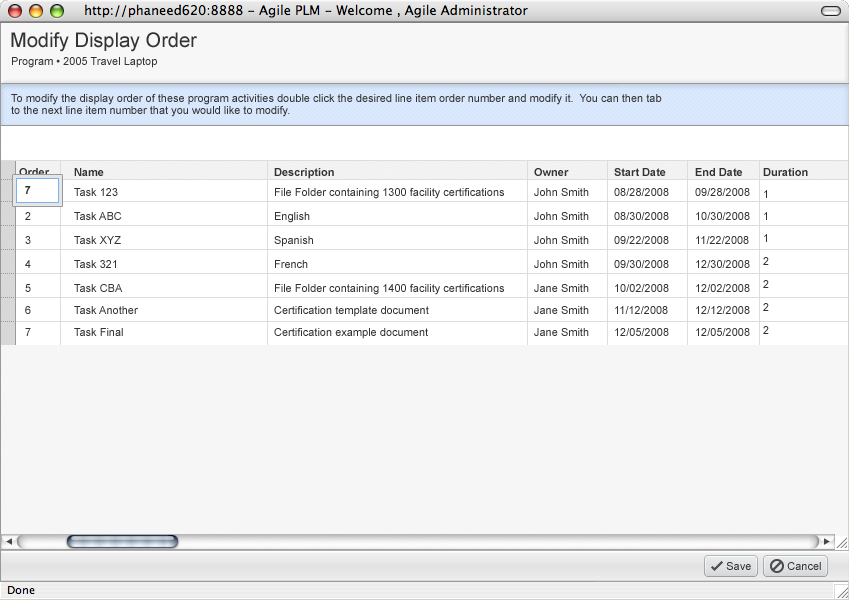
<style>
.page{position:relative;width:849px;height:600px;background:#ffffff}
.page>*{position:absolute;margin:0}
.t1{font:20px "ArialMT";color:#333333}
.t2{font:11px "ArialMT";color:#333333}
.t3{font:11px/12px "ArialMT";color:#333333}
.t4{font:11px/24px "ArialMT";color:#333333}
.t5{font:11px/20px "Arial-BoldMT";color:#333333}
.t6{font:11px/22px "ArialMT";color:#333333}
.t7{font:11px/20px "ArialMT";color:#333333}
.t8{font:11px/23px "ArialMT";color:#333333}
.t9{font:11px "Arial-BoldMT";color:#333333}
</style>
<div class="page">
<p class="t1" style="left:11px;top:32px;width:186px;height:20px">Modify Display Order</p>
<p class="t2" style="left:12px;top:57px;width:145px;height:11px">Program • 2005 Travel Laptop</p>
<p class="t3" style="left:11px;top:94px;width:651px;height:23px">To modify the display order of these program activities double click the desired line item order number and modify it.  You can then tab<br>to the next line item number that you would like to modify.</p>
<p class="t4" style="left:19px;top:168px;width:31px;height:168px"><span class="t5">Order<br><br></span>  2 <br>  3<br>  4<br>  5<br><span class="t6">  6<br>  7</span></p>
<p class="t4" style="left:74px;top:168px;width:64px;height:168px"><span class="t5">Name<br></span><span class="t7">Task 123<br></span>Task ABC<br>Task XYZ<br>Task 321<br>Task CBA<br><span class="t6">Task Another<br>Task Final</span></p>
<p class="t4" style="left:274px;top:168px;width:230px;height:171px"><span class="t5">Description<br></span><span class="t7">File Folder containing 1300 facility certifications<br></span>English <br>Spanish<br>French<br>File Folder containing 1400 facility certifications<br><span class="t6">Certification template document<br>Certification example document</span></p>
<p class="t4" style="left:534px;top:168px;width:55px;height:168px"><span class="t5">Owner<br></span><span class="t7">John Smith<br></span>John Smith<br>John Smith<br>John Smith<br>Jane Smith<br><span class="t6">Jane Smith<br>Jane Smith</span></p>
<p class="t4" style="left:614px;top:168px;width:55px;height:168px"><span class="t5">Start Date<br></span><span class="t7">08/28/2008<br></span>08/30/2008<br>09/22/2008<br>09/30/2008<br>10/02/2008<br><span class="t6">11/12/2008<br>12/05/2008</span></p>
<p class="t4" style="left:695px;top:168px;width:55px;height:168px"><span class="t5">End Date<br></span><span class="t7">09/28/2008<br></span>10/30/2008<br>11/22/2008<br>12/30/2008<br>12/02/2008<br><span class="t6">12/12/2008<br>12/05/2008</span></p>
<p class="t5" style="left:763px;top:168px;width:45px;height:166px">Duration<br><span class="t6">1<br>1<br>1<br></span><span class="t8">2<br>2<br>2<br>2</span></p>
<p class="t9" style="left:25px;top:186px;width:6px;height:8px">7</p>
<p class="t2" style="left:726px;top:562px;width:25px;height:8px">Save</p>
<p class="t2" style="left:787px;top:562px;width:34px;height:8px">Cancel</p>
</div>
